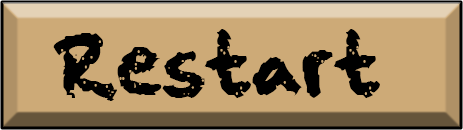
<style>
.page{position:relative;width:463px;height:130px;background:#cdaa77}
.page>*{position:absolute;margin:0}
.t1{font:70px "squeakychalksound";color:#000000}
</style>
<div class="page">
<p class="t1" style="left:53px;top:29px;width:327px;height:72px">Restart</p>
</div>
